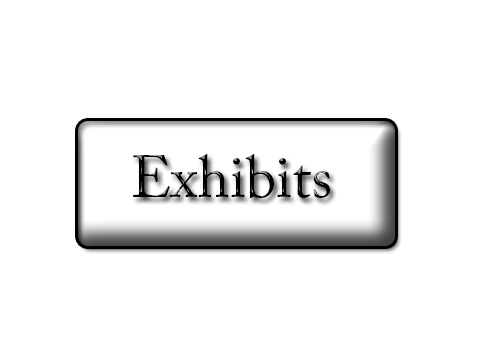
<style>
.page{position:relative;width:504px;height:360px;background:#ffffff}
.page>*{position:absolute;margin:0}
.t1{font:60px "ACaslonPro-Regular";color:#000000}
</style>
<div class="page">
<p class="t1" style="left:133px;top:154px;width:197px;height:44px">Exhibits</p>
</div>
